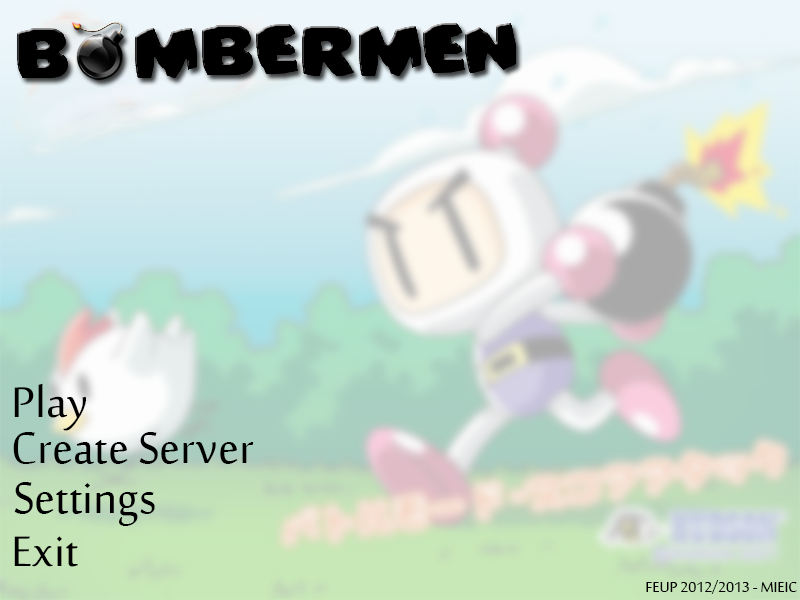
<style>
.page{position:relative;width:800px;height:600px}
.page>*{position:absolute;margin:0}
.t1{font:59px "SakkalMajalla";color:#000000}
.t2{font:19.7px "SakkalMajalla";color:#000000}
</style>
<div class="page">
<p class="t1" style="left:14px;top:383px;width:72px;height:48px">Play</p>
<p class="t1" style="left:13px;top:432px;width:241px;height:32px">Create Server</p>
<p class="t1" style="left:14px;top:482px;width:141px;height:44px">Settings</p>
<p class="t1" style="left:14px;top:536px;width:64px;height:31px">Exit</p>
<p class="t2" style="left:646px;top:580px;width:151px;height:14px">FEUP 2012/2013 - MIEIC</p>
</div>
